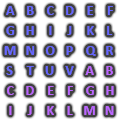
<style>
.page{position:relative;width:128px;height:128px;background:#ffffff}
.page>*{position:absolute;margin:0}
.t1{font:14px "Calibri-Bold";color:#6666ff}
.t2{font:14px "Calibri-Bold";color:#bb66ff}
</style>
<div class="page">
<p class="t1" style="left:6px;top:6px;width:9px;height:9px">A</p>
<p class="t1" style="left:27px;top:6px;width:7px;height:9px">B</p>
<p class="t1" style="left:47px;top:6px;width:7px;height:9px">C</p>
<p class="t1" style="left:66px;top:6px;width:8px;height:9px">D</p>
<p class="t1" style="left:87px;top:6px;width:6px;height:9px">E</p>
<p class="t1" style="left:107px;top:6px;width:6px;height:9px">F</p>
<p class="t1" style="left:6px;top:26px;width:9px;height:9px">G</p>
<p class="t1" style="left:26px;top:26px;width:8px;height:9px">H</p>
<p class="t1" style="left:49px;top:26px;width:3px;height:9px">I</p>
<p class="t1" style="left:67px;top:26px;width:5px;height:9px">J</p>
<p class="t1" style="left:87px;top:26px;width:7px;height:9px">K</p>
<p class="t1" style="left:107px;top:26px;width:6px;height:9px">L</p>
<p class="t1" style="left:4px;top:46px;width:12px;height:9px">M</p>
<p class="t1" style="left:26px;top:46px;width:9px;height:9px">N</p>
<p class="t1" style="left:45px;top:46px;width:10px;height:9px">O</p>
<p class="t1" style="left:66px;top:46px;width:7px;height:9px">P</p>
<p class="t1" style="left:86px;top:46px;width:10px;height:10px">Q</p>
<p class="t1" style="left:106px;top:46px;width:7px;height:9px">R</p>
<p class="t1" style="left:6px;top:66px;width:7px;height:9px">S</p>
<p class="t1" style="left:26px;top:66px;width:8px;height:9px">T</p>
<p class="t1" style="left:45px;top:66px;width:9px;height:9px">U</p>
<p class="t1" style="left:65px;top:66px;width:9px;height:9px">V</p>
<p class="t2" style="left:85px;top:66px;width:9px;height:9px">A</p>
<p class="t2" style="left:106px;top:66px;width:7px;height:9px">B</p>
<p class="t2" style="left:7px;top:86px;width:7px;height:9px">C</p>
<p class="t2" style="left:26px;top:86px;width:8px;height:9px">D</p>
<p class="t2" style="left:48px;top:86px;width:6px;height:9px">E</p>
<p class="t2" style="left:67px;top:86px;width:6px;height:9px">F</p>
<p class="t2" style="left:86px;top:86px;width:8px;height:9px">G</p>
<p class="t2" style="left:106px;top:86px;width:8px;height:9px">H</p>
<p class="t2" style="left:9px;top:106px;width:3px;height:9px">I</p>
<p class="t2" style="left:27px;top:106px;width:5px;height:9px">J</p>
<p class="t2" style="left:47px;top:106px;width:7px;height:9px">K</p>
<p class="t2" style="left:67px;top:106px;width:6px;height:9px">L</p>
<p class="t2" style="left:84px;top:106px;width:11px;height:9px">M</p>
<p class="t2" style="left:105px;top:106px;width:9px;height:9px">N</p>
</div>
